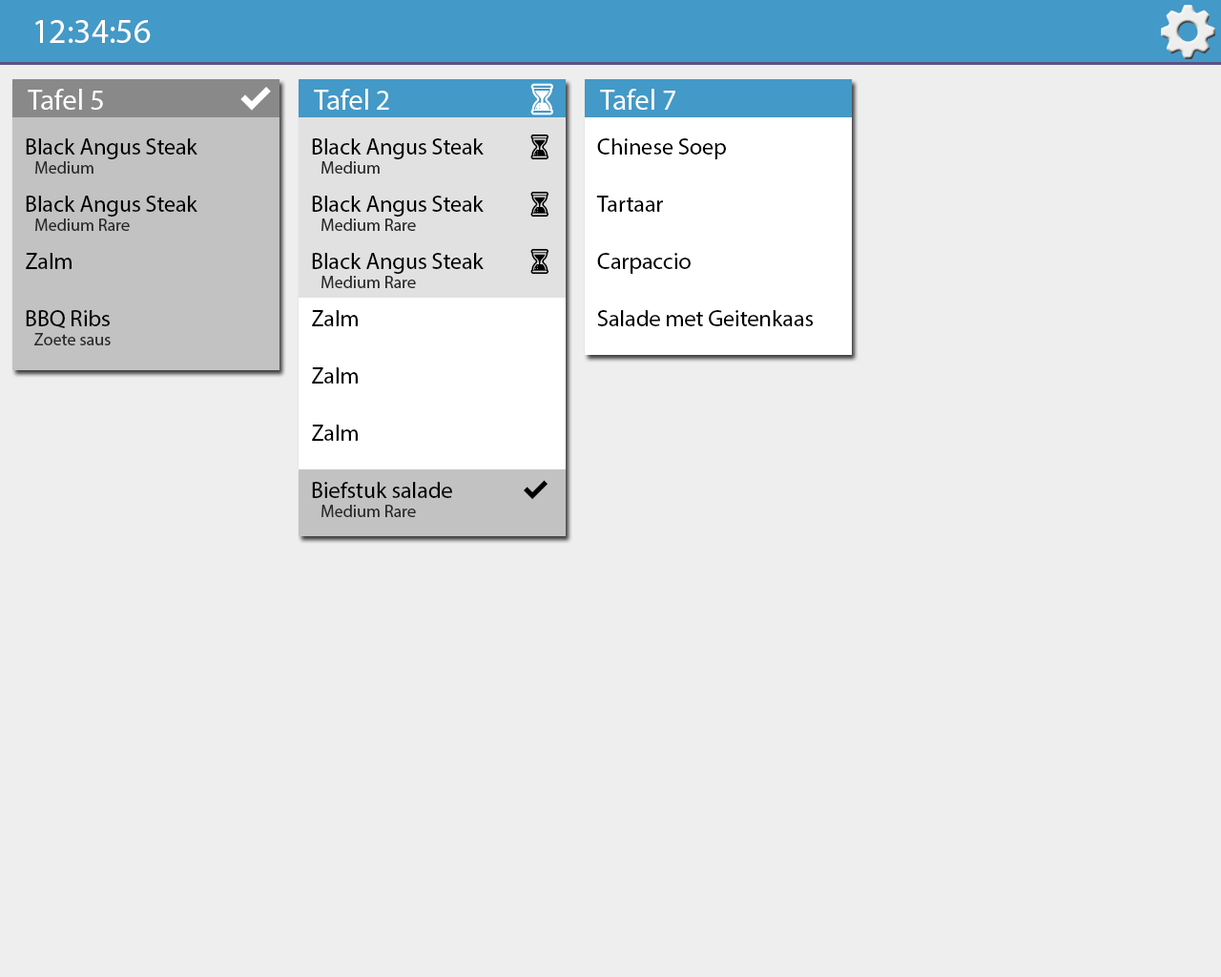
<style>
.page{position:relative;width:1221px;height:977px;background:#eeeeee}
.page>*{position:absolute;margin:0}
.t1{font:34.3px "MyriadPro-Regular";color:#ffffff}
.t2{font:28.6px "MyriadPro-Regular";color:#ffffff}
.t3{font:22.9px/57.2px "MyriadPro-Regular";color:#000000}
.t4{font:17.2px/57.2px "MyriadPro-Regular";color:#2b2b2b}
</style>
<div class="page">
<p class="t1" style="left:35px;top:20px;width:116px;height:23px">12:34:56</p>
<p class="t2" style="left:28px;top:89px;width:75px;height:21px">Tafel 5</p>
<p class="t2" style="left:314px;top:89px;width:75px;height:21px">Tafel 2</p>
<p class="t2" style="left:600px;top:89px;width:75px;height:21px">Tafel 7</p>
<p class="t3" style="left:26px;top:138px;width:171px;height:190px">Black Angus Steak<br>Black Angus Steak<br>Zalm<br>BBQ Ribs</p>
<p class="t3" style="left:312px;top:138px;width:172px;height:360px">Black Angus Steak<br>Black Angus Steak<br>Black Angus Steak<br>Zalm<br>Zalm<br>Zalm<br>Biefstuk salade</p>
<p class="t3" style="left:596px;top:138px;width:218px;height:188px">Chinese Soep<br>Tartaar<br>Carpaccio<br>Salade met Geitenkaas</p>
<p class="t4" style="left:34px;top:161px;width:96px;height:184px">Medium<br>Medium Rare<br><br>Zoete saus</p>
<p class="t4" style="left:321px;top:161px;width:95px;height:356px">Medium<br>Medium Rare<br>Medium Rare<br><br><br><br>Medium Rare</p>
</div>
